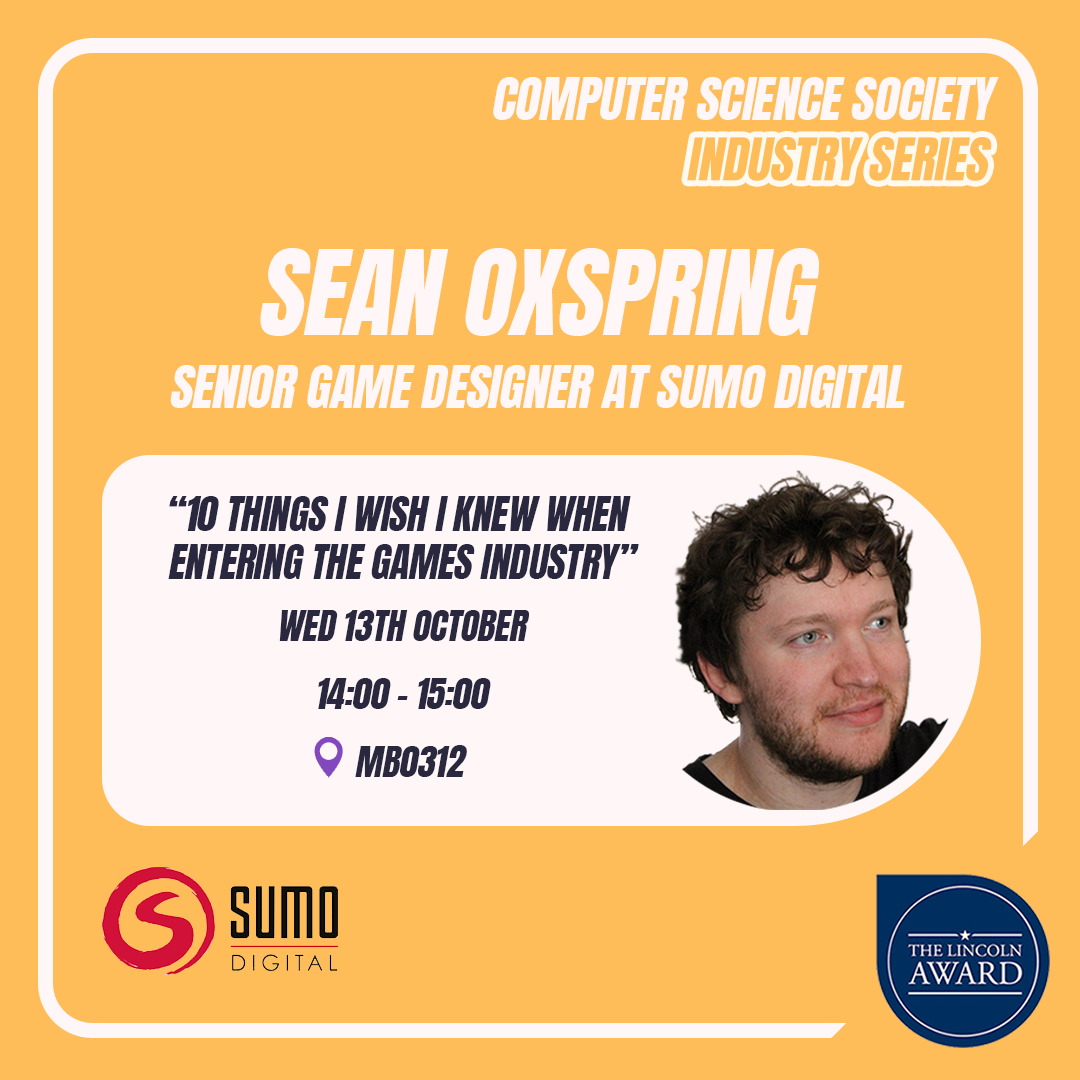
<style>
.page{position:relative;width:1080px;height:1080px;background:#ffbd59}
.page>*{position:absolute;margin:0}
.t1{font:50px "Anton-Regular";letter-spacing:-0.01em;color:#fff7f7;font-style:italic}
.t2{font:100px "Anton-Regular";letter-spacing:-0.01em;color:#fff7f7;font-style:italic}
.t3{font:40px "Anton-Regular";letter-spacing:-0.01em;color:#29283f;font-style:italic}
.t4{font:36.3px "Anton-Regular";letter-spacing:-0.01em;color:#29283f;font-style:italic}
</style>
<div class="page">
<p class="t1" style="left:493px;top:77px;width:506px;height:43px">COMPUTER SCIENCE SOCIETY</p>
<p class="t2" style="left:260px;top:248px;width:559px;height:88px">SEAN OXSPRING</p>
<p class="t1" style="left:170px;top:365px;width:735px;height:43px">SENIOR GAME DESIGNER AT SUMO DIGITAL</p>
<p class="t3" style="left:168px;top:496px;width:471px;height:83px;text-align:center">“10 THINGS I WISH I KNEW WHEN <br>ENTERING THE GAMES INDUSTRY”</p>
<p class="t4" style="left:279px;top:610px;width:250px;height:31px">WED 13TH OCTOBER</p>
<p class="t4" style="left:318px;top:678px;width:173px;height:31px">14:00 - 15:00</p>
<p class="t4" style="left:355px;top:745px;width:112px;height:32px">MB0312</p>
</div>
